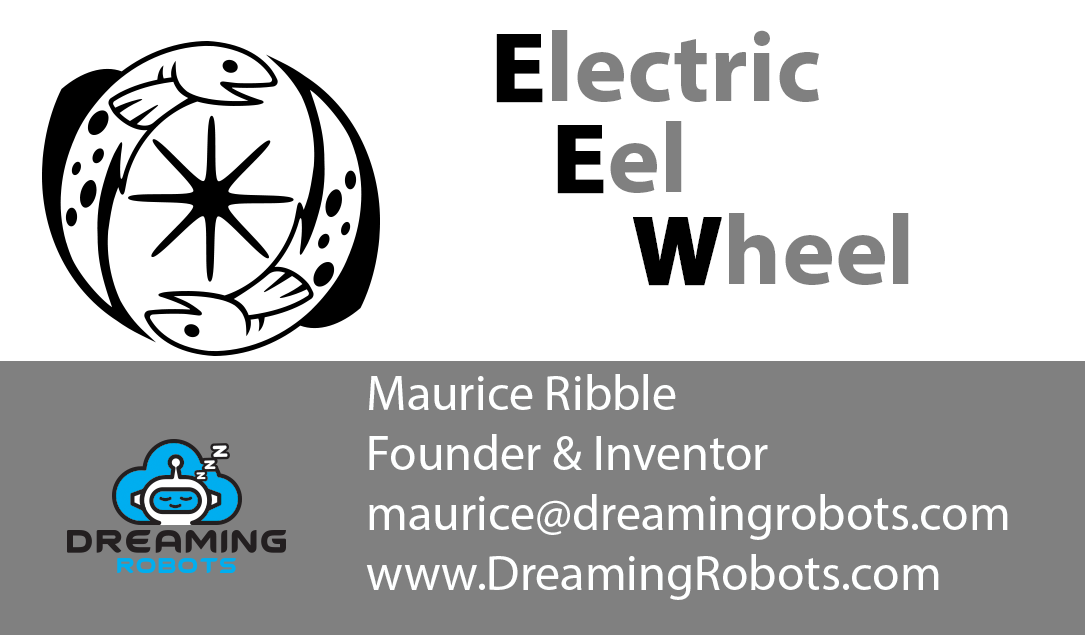
<style>
.page{position:relative;width:1085px;height:635px;background:#ffffff}
.page>*{position:absolute;margin:0}
.t1{font:100px/91.7px "MyriadPro-Bold";color:#808080}
.t2{font:100px/91.7px "MyriadPro-Bold";color:#000000;font-weight:bold}
.t3{font:50px "MyriadPro-Regular";color:#feffff}
</style>
<div class="page">
<p class="t1" style="left:496px;top:30px;width:413px;height:256px"><span class="t2">E</span>lectric<br>   <span class="t2">E</span>el<br>       <span class="t2">W</span>heel</p>
<p class="t3" style="left:366px;top:374px;width:642px;height:226px">Maurice Ribble<br>Founder &amp; Inventor<br>maurice@dreamingrobots.com<br>www.DreamingRobots.com</p>
</div>
